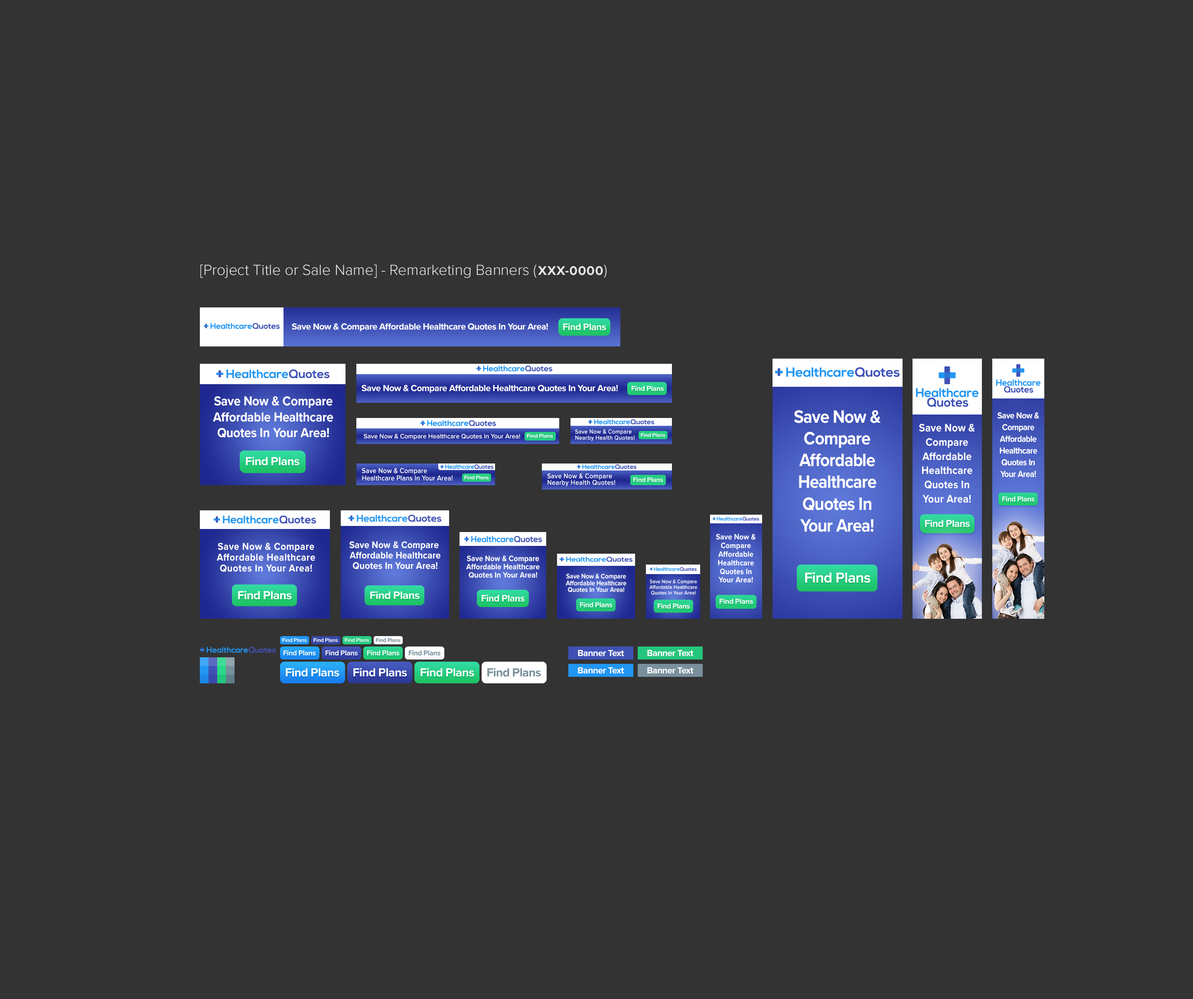
<style>
.page{position:relative;width:1193px;height:999px;background:#333333}
.page>*{position:absolute;margin:0}
.t1{font:15.2px "ProximaNova-Light";color:#e8e8e8}
.t2{font:13px "ProximaNova-Bold";letter-spacing:0.04em;color:#e8e8e8}
.t3{font:9.1px "ProximaNova-Bold";letter-spacing:-0.025em;color:#ffffff}
.t4{font:13.5px/15.7px "ProximaNova-Bold";letter-spacing:-0.005em;color:#ffffff;scale:0.9 1}
.t5{font:18.5px/21.8px "ProximaNova-Bold";letter-spacing:-0.025em;color:#ffffff;scale:0.9 1}
.t6{font:9px/11.7px "ProximaNova-Bold";letter-spacing:-0.025em;color:#ffffff;scale:0.9 1}
.t7{font:11.2px/14.2px "ProximaNova-Bold";letter-spacing:0.015em;color:#ffffff;scale:0.9 1}
.t8{font:6.5px "ProximaNova-Semibold";letter-spacing:-0.005em;color:#ffffff}
.t9{font:6.1px/5.8px "ProximaNova-Semibold";letter-spacing:0.035em;color:#ffffff;scale:0.9 1}
.t10{font:7.3px/7.1px "ProximaNova-Semibold";letter-spacing:0.015em;color:#ffffff;scale:0.9 1}
.t11{font:7px/6.2px "ProximaNova-Semibold";letter-spacing:0.035em;color:#ffffff;scale:0.9 1}
.t12{font:8px/8.6px "ProximaNova-Bold";letter-spacing:0.015em;color:#ffffff;scale:0.9 1}
.t13{font:10.3px/10.9px "ProximaNova-Bold";letter-spacing:0.035em;color:#ffffff;scale:0.9 1}
.t14{font:9.9px/10.5px "ProximaNova-Bold";letter-spacing:0.015em;color:#ffffff;scale:0.9 1}
.t15{font:8px/8.2px "ProximaNova-Bold";letter-spacing:0.01em;color:#ffffff;scale:0.9 1}
.t16{font:6.8px/6.6px "ProximaNova-Bold";letter-spacing:-0.005em;color:#ffffff;scale:0.9 1}
.t17{font:5.2px/5.4px "ProximaNova-Semibold";letter-spacing:0.015em;color:#ffffff;scale:0.9 1}
</style>
<div class="page">
<p class="t1" style="left:200px;top:265px;width:407px;height:13px">[Project Title or Sale Name] - Remarketing Banners (<span class="t2">XXX-0000</span>)</p>
<p class="t3" style="left:292px;top:323px;width:256px;height:8px">Save Now &amp; Compare Affordable Healthcare Quotes In Your Area!</p>
<p class="t3" style="left:362px;top:385px;width:256px;height:8px">Save Now &amp; Compare Affordable Healthcare Quotes In Your Area!</p>
<p class="t4" style="left:213px;top:396px;width:120px;height:42px;text-align:center">Save Now &amp; Compare<br>Affordable Healthcare<br>Quotes In Your Area!</p>
<p class="t5" style="left:794px;top:410px;width:87px;height:122px;text-align:center">Save Now &amp;<br>Compare<br>Affordable<br>Healthcare<br>Quotes In<br>Your Area!</p>
<p class="t6" style="left:998px;top:412px;width:42px;height:65px;text-align:center">Save Now &amp;<br>Compare<br>Affordable<br>Healthcare<br>Quotes In<br>Your Area!</p>
<p class="t7" style="left:919px;top:424px;width:56px;height:79px;text-align:center">Save Now &amp;<br>Compare<br>Affordable<br>Healthcare<br>Quotes In<br>Your Area!</p>
<p class="t8" style="left:364px;top:434px;width:156px;height:6px">Save Now &amp; Compare Healthcare Quotes In Your Area!</p>
<p class="t9" style="left:575px;top:429px;width:60px;height:12px">Save Now &amp; Compare<br>Nearby Health Quotes!</p>
<p class="t10" style="left:362px;top:468px;width:91px;height:13px">Save Now &amp; Compare<br>Healthcare Plans In Your Area!</p>
<p class="t11" style="left:547px;top:474px;width:68px;height:13px">Save Now &amp; Compare <br>Nearby Health Quotes!</p>
<p class="t12" style="left:716px;top:534px;width:40px;height:49px;text-align:center">Save Now &amp;<br>Compare<br>Affordable<br>Healthcare<br>Quotes In<br>Your Area!</p>
<p class="t13" style="left:217px;top:543px;width:98px;height:29px;text-align:center">Save Now &amp; Compare<br>Affordable Healthcare<br>Quotes In Your Area!</p>
<p class="t14" style="left:350px;top:541px;width:91px;height:28px;text-align:center">Save Now &amp; Compare <br>Affordable Healthcare<br>Quotes In Your Area!</p>
<p class="t15" style="left:466px;top:556px;width:74px;height:22px;text-align:center">Save Now &amp; Compare<br>Affordable Healthcare<br>Quotes In Your Area!</p>
<p class="t16" style="left:566px;top:574px;width:61px;height:18px;text-align:center">Save Now &amp; Compare<br>Affordable Healthcare<br>Quotes In Your Area!</p>
<p class="t17" style="left:650px;top:579px;width:47px;height:16px;text-align:center">Save Now &amp; Compare<br>Affordable Healthcare<br>Quotes In Your Area!</p>
<p class="t3" style="left:578px;top:650px;width:46px;height:7px">Banner Text</p>
<p class="t3" style="left:647px;top:650px;width:47px;height:7px">Banner Text</p>
<p class="t3" style="left:578px;top:667px;width:46px;height:7px">Banner Text</p>
<p class="t3" style="left:647px;top:667px;width:47px;height:7px">Banner Text</p>
</div>
